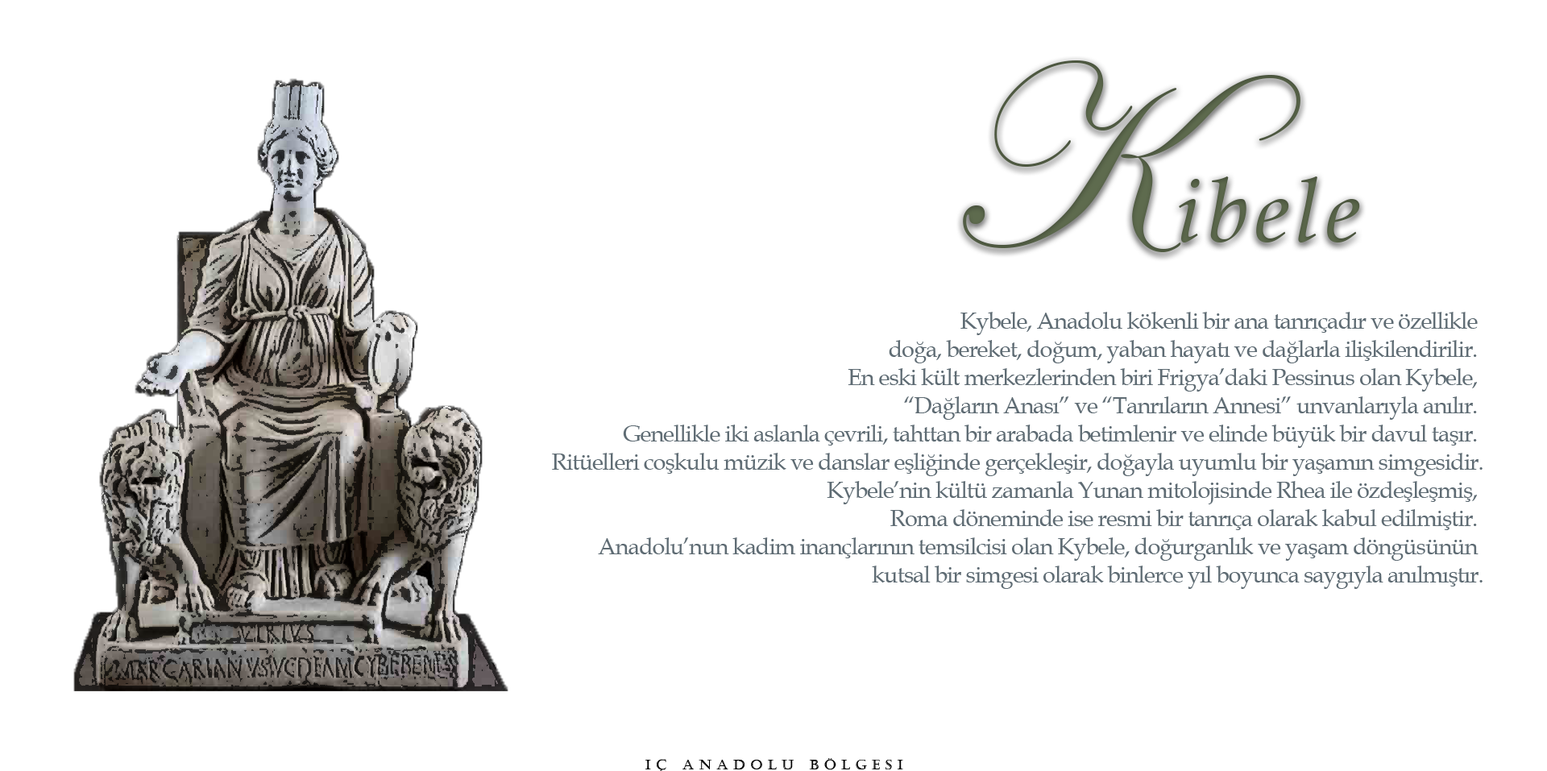
<style>
.page{position:relative;width:1547px;height:771px;background:#ffffff}
.page>*{position:absolute;margin:0}
.t1{font:90.5px "BookAntiqua-Italic";letter-spacing:0.06em;color:#5e6b4e}
.t2{font:262.1px "EdwardianScriptITC";letter-spacing:0.06em;color:#5e6b4e}
.t3{font:23.5px "BookAntiqua";letter-spacing:-0.04em;color:#5f6c74}
.t4{font:13.4px "Castellar";letter-spacing:0.42em;color:#000000}
</style>
<div class="page">
<p class="t1" style="left:963px;top:60px;width:397px;height:192px"><span class="t2">K</span>ibele</p>
<p class="t3" style="left:552px;top:312px;width:930px;height:277px;text-align:right">Kybele, Anadolu kökenli bir ana tanrıçadır ve özellikle <br>doğa, bereket, doğum, yaban hayatı ve dağlarla ilişkilendirilir. <br>En eski kült merkezlerinden biri Frigya’daki Pessinus olan Kybele, <br>“Dağların Anası” ve “Tanrıların Annesi” unvanlarıyla anılır. <br>Genellikle iki aslanla çevrili, tahttan bir arabada betimlenir ve elinde büyük bir davul taşır. <br>Ritüelleri coşkulu müzik ve danslar eşliğinde gerçekleşir, doğayla uyumlu bir yaşamın simgesidir.<br>Kybele’nin kültü zamanla Yunan mitolojisinde Rhea ile özdeşleşmiş, <br>Roma döneminde ise resmi bir tanrıça olarak kabul edilmiştir. <br>Anadolu’nun kadim inançlarının temsilcisi olan Kybele, doğurganlık ve yaşam döngüsünün <br>kutsal bir simgesi olarak binlerce yıl boyunca saygıyla anılmıştır.</p>
<p class="t4" style="left:644px;top:758px;width:259px;height:13px">iç anadolu bölgesi</p>
</div>
